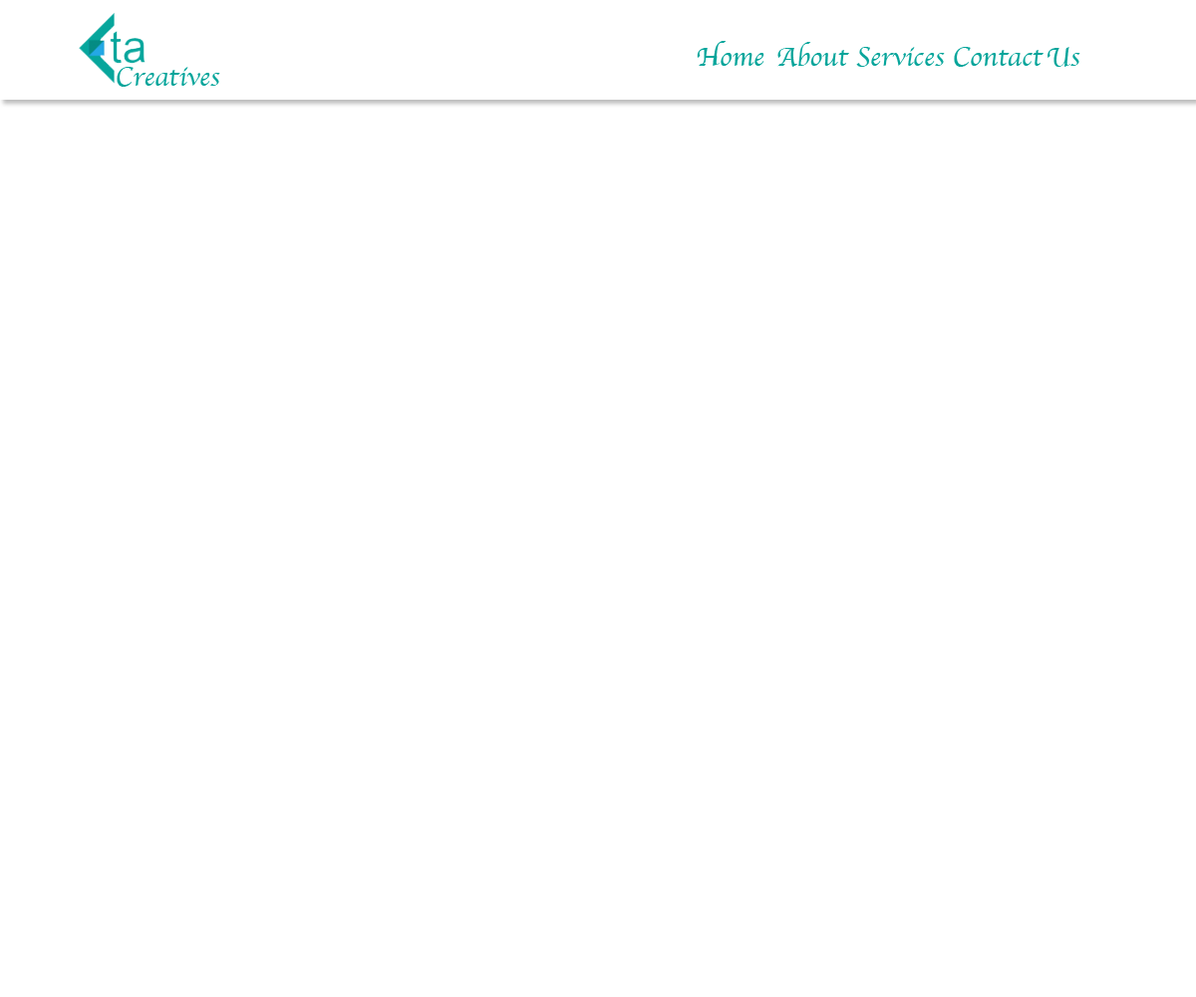
<style>
.page{position:relative;width:1196px;height:997px;background:#ffffff}
.page>*{position:absolute;margin:0}
.t1{font:27.9px "Apple-Chancery";color:#06a59b}
</style>
<div class="page">
<p class="t1" style="left:697px;top:41px;width:384px;height:26px">Home   About  Services  Contact Us</p>
<p class="t1" style="left:117px;top:67px;width:103px;height:20px">Creatives</p>
</div>
